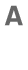
<style>
.page{position:relative;width:28px;height:70px;background:#ffffff}
.page>*{position:absolute;margin:0}
.t1{font:26px "Transport-Heavy-Regular";color:#666666}
</style>
<div class="page">
<p class="t1" style="left:4px;top:5px;width:19px;height:21px">A</p>
</div>
